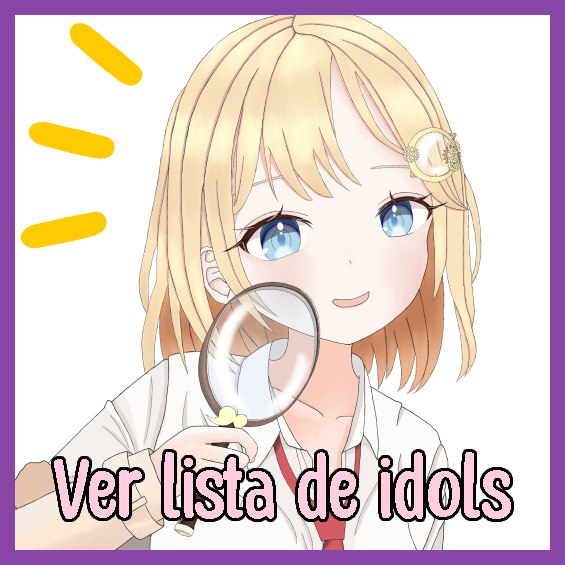
<style>
.page{position:relative;width:565px;height:565px;background:#ffffff}
.page>*{position:absolute;margin:0}
.t1{font:94.3px "HoneyNotes-Regular";color:#ffcddd}
</style>
<div class="page">
<p class="t1" style="left:54px;top:452px;width:457px;height:67px">Ver lista de idols</p>
</div>
